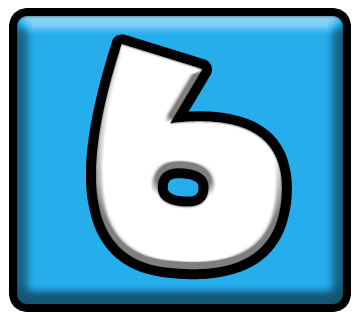
<style>
.page{position:relative;width:360px;height:320px;background:#26adec}
.page>*{position:absolute;margin:0}
.t1{font:325.5px "Funhouse";color:#ffffff;scale:0.91 1}
</style>
<div class="page">
<p class="t1" style="left:96px;top:44px;width:186px;height:226px;rotate:6deg">6</p>
</div>
